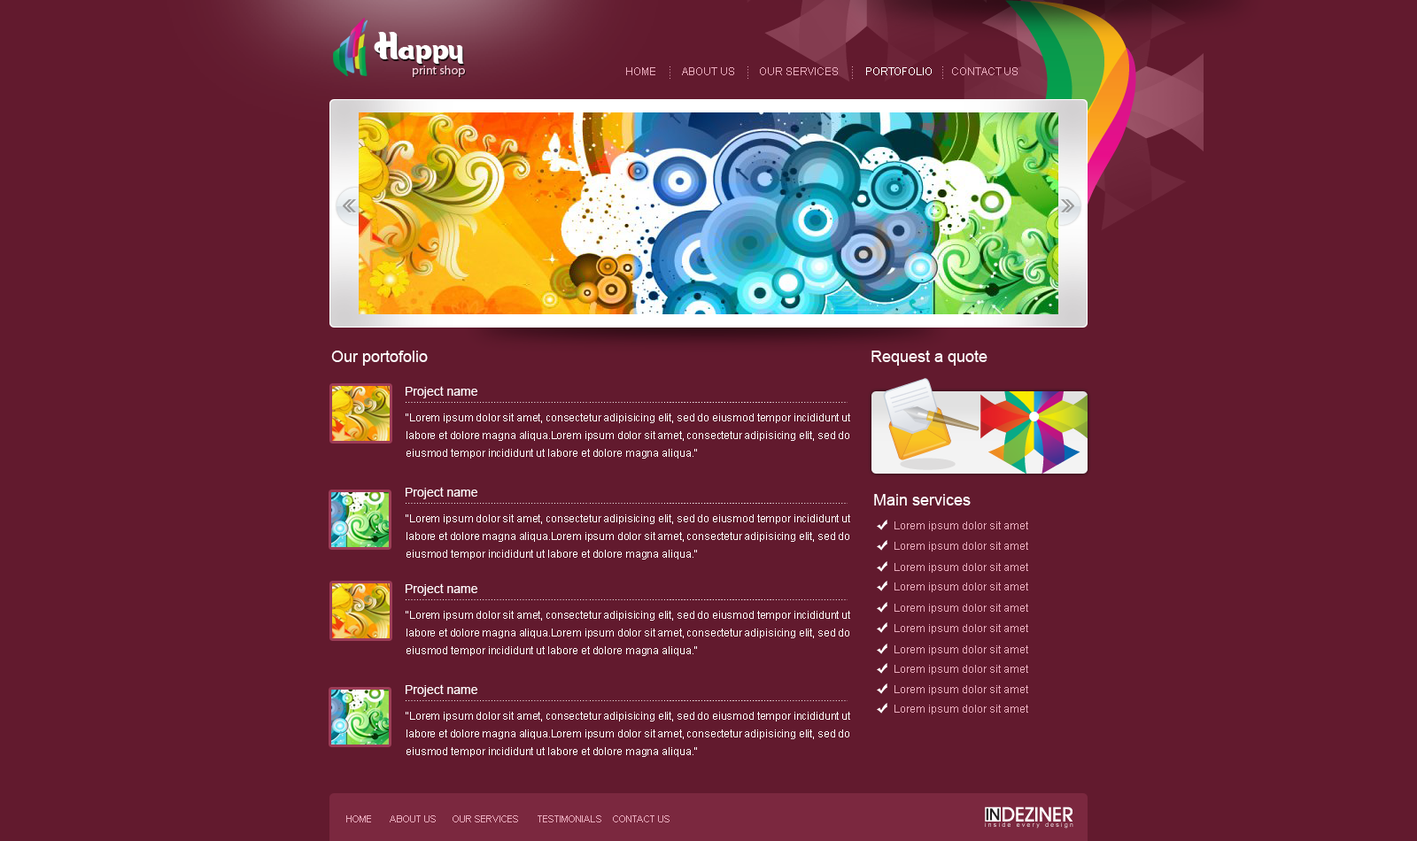
<style>
.page{position:relative;width:1417px;height:841px;background:#621a2e}
.page>*{position:absolute;margin:0}
.t1{font:42.5px "CandyStoreBV";color:#ffffff}
.t2{font:12.4px "MyriadPro-Regular";color:#f7cdd9}
.t3{font:10.6px "ArialMT";color:#eaadbe}
.t4{font:10.6px "ArialMT";color:#ffffff}
.t5{font:15.9px "ArialMT";color:#ffffff}
.t6{font:12.4px "ArialMT";color:#ffffff}
.t7{font:10.6px/17.7px "ArialMT";color:#ffffff}
.t8{font:9.7px "ArialMT";color:#eaadbe}
</style>
<div class="page">
<p class="t1" style="left:374px;top:32px;width:90px;height:32px">Happy</p>
<p class="t2" style="left:413px;top:66px;width:52px;height:11px">print shop</p>
<p class="t3" style="left:626px;top:67px;width:392px;height:8px">HOME          ABOUT US         OUR SERVICES          <span class="t4">PORTOFOLIO</span>       CONTACT US</p>
<p class="t5" style="left:331px;top:351px;width:97px;height:15px">Our portofolio</p>
<p class="t5" style="left:872px;top:351px;width:116px;height:15px">Request a quote</p>
<p class="t6" style="left:406px;top:386px;width:71px;height:13px">Project name</p>
<p class="t7" style="left:406px;top:414px;width:444px;height:45px;text-align:justify">“Lorem ipsum dolor sit amet, consectetur adipisicing elit, sed do eiusmod tempor incididunt ut labore et dolore magna aliqua.Lorem ipsum dolor sit amet, consectetur adipisicing elit, sed do eiusmod tempor incididunt ut labore et dolore magna aliqua.”</p>
<p class="t6" style="left:406px;top:487px;width:71px;height:13px">Project name</p>
<p class="t5" style="left:874px;top:494px;width:97px;height:12px">Main services</p>
<p class="t7" style="left:406px;top:515px;width:444px;height:45px;text-align:justify">“Lorem ipsum dolor sit amet, consectetur adipisicing elit, sed do eiusmod tempor incididunt ut labore et dolore magna aliqua.Lorem ipsum dolor sit amet, consectetur adipisicing elit, sed do eiusmod tempor incididunt ut labore et dolore magna aliqua.”</p>
<p class="t3" style="left:895px;top:522px;width:133px;height:9px">Lorem ipsum dolor sit amet</p>
<p class="t3" style="left:895px;top:542px;width:133px;height:10px">Lorem ipsum dolor sit amet</p>
<p class="t3" style="left:895px;top:563px;width:133px;height:10px">Lorem ipsum dolor sit amet</p>
<p class="t6" style="left:406px;top:584px;width:71px;height:12px">Project name</p>
<p class="t3" style="left:895px;top:583px;width:133px;height:10px">Lorem ipsum dolor sit amet</p>
<p class="t3" style="left:895px;top:604px;width:133px;height:10px">Lorem ipsum dolor sit amet</p>
<p class="t7" style="left:406px;top:611px;width:444px;height:45px;text-align:justify">“Lorem ipsum dolor sit amet, consectetur adipisicing elit, sed do eiusmod tempor incididunt ut labore et dolore magna aliqua.Lorem ipsum dolor sit amet, consectetur adipisicing elit, sed do eiusmod tempor incididunt ut labore et dolore magna aliqua.”</p>
<p class="t3" style="left:895px;top:624px;width:133px;height:10px">Lorem ipsum dolor sit amet</p>
<p class="t3" style="left:895px;top:646px;width:133px;height:9px">Lorem ipsum dolor sit amet</p>
<p class="t3" style="left:895px;top:665px;width:133px;height:10px">Lorem ipsum dolor sit amet</p>
<p class="t6" style="left:406px;top:685px;width:71px;height:12px">Project name</p>
<p class="t3" style="left:895px;top:686px;width:133px;height:9px">Lorem ipsum dolor sit amet</p>
<p class="t7" style="left:406px;top:712px;width:444px;height:45px;text-align:justify">“Lorem ipsum dolor sit amet, consectetur adipisicing elit, sed do eiusmod tempor incididunt ut labore et dolore magna aliqua.Lorem ipsum dolor sit amet, consectetur adipisicing elit, sed do eiusmod tempor incididunt ut labore et dolore magna aliqua.”</p>
<p class="t3" style="left:895px;top:705px;width:133px;height:10px">Lorem ipsum dolor sit amet</p>
<p class="t8" style="left:346px;top:816px;width:324px;height:7px">HOME       ABOUT US      OUR SERVICES       TESTIMONIALS    CONTACT US</p>
</div>
